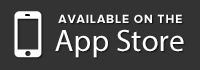
<style>
.page{position:relative;width:200px;height:70px;background:#333333}
.page>*{position:absolute;margin:0}
.t1{font:12px "ProximaNova-Bold";letter-spacing:0.075em;color:#ffffff;text-transform:uppercase}
.t2{font:31.2px "MyriadPro-Regular";color:#ffffff}
</style>
<div class="page">
<p class="t1" style="left:58px;top:14px;width:124px;height:9px">Available on the</p>
<p class="t2" style="left:55px;top:29px;width:129px;height:29px">App Store</p>
</div>
